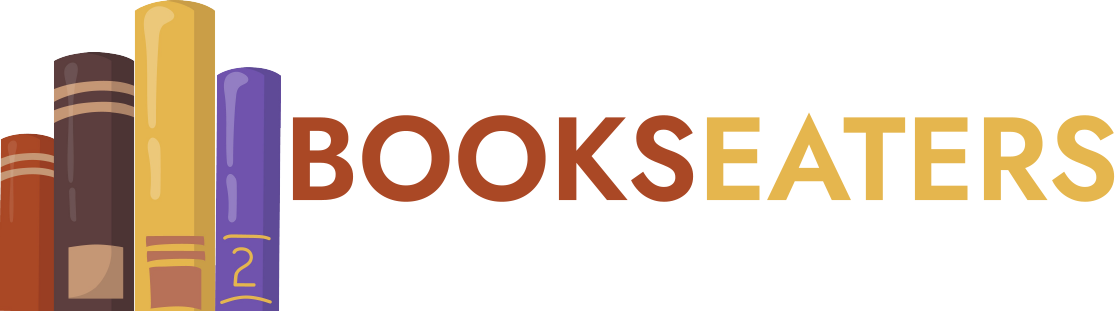
<style>
.page{position:relative;width:1119px;height:311px;background:#ffffff}
.page>*{position:absolute;margin:0}
.t1{font:118px "Jost-SemiBold";color:#e5b64e}
.t2{font:118px "Jost-SemiBold";color:#aa4825}
</style>
<div class="page">
<p class="t1" style="left:292px;top:112px;width:823px;height:90px"><span class="t2">BOOKS</span>EATERS</p>
</div>
